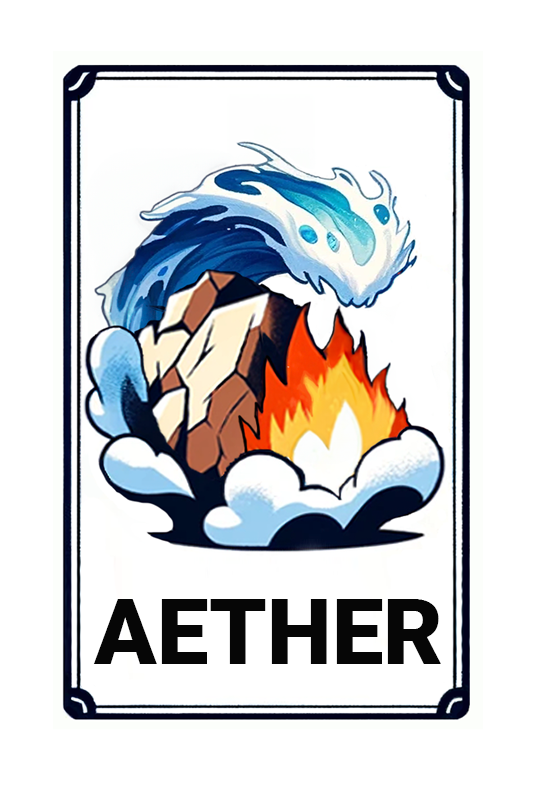
<style>
.page{position:relative;width:534px;height:785px;background:#ffffff}
.page>*{position:absolute;margin:0}
.t1{font:92px "Roboto-Black";color:#060606}
</style>
<div class="page">
<p class="t1" style="left:93px;top:599px;width:348px;height:65px">AETHER</p>
</div>
